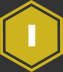
<style>
.page{position:relative;width:63px;height:72px;background:#cdb320}
.page>*{position:absolute;margin:0}
.t1{font:30px "Arial-Black";color:#ffffff}
</style>
<div class="page">
<p class="t1" style="left:28px;top:24px;width:8px;height:23px">I</p>
</div>
